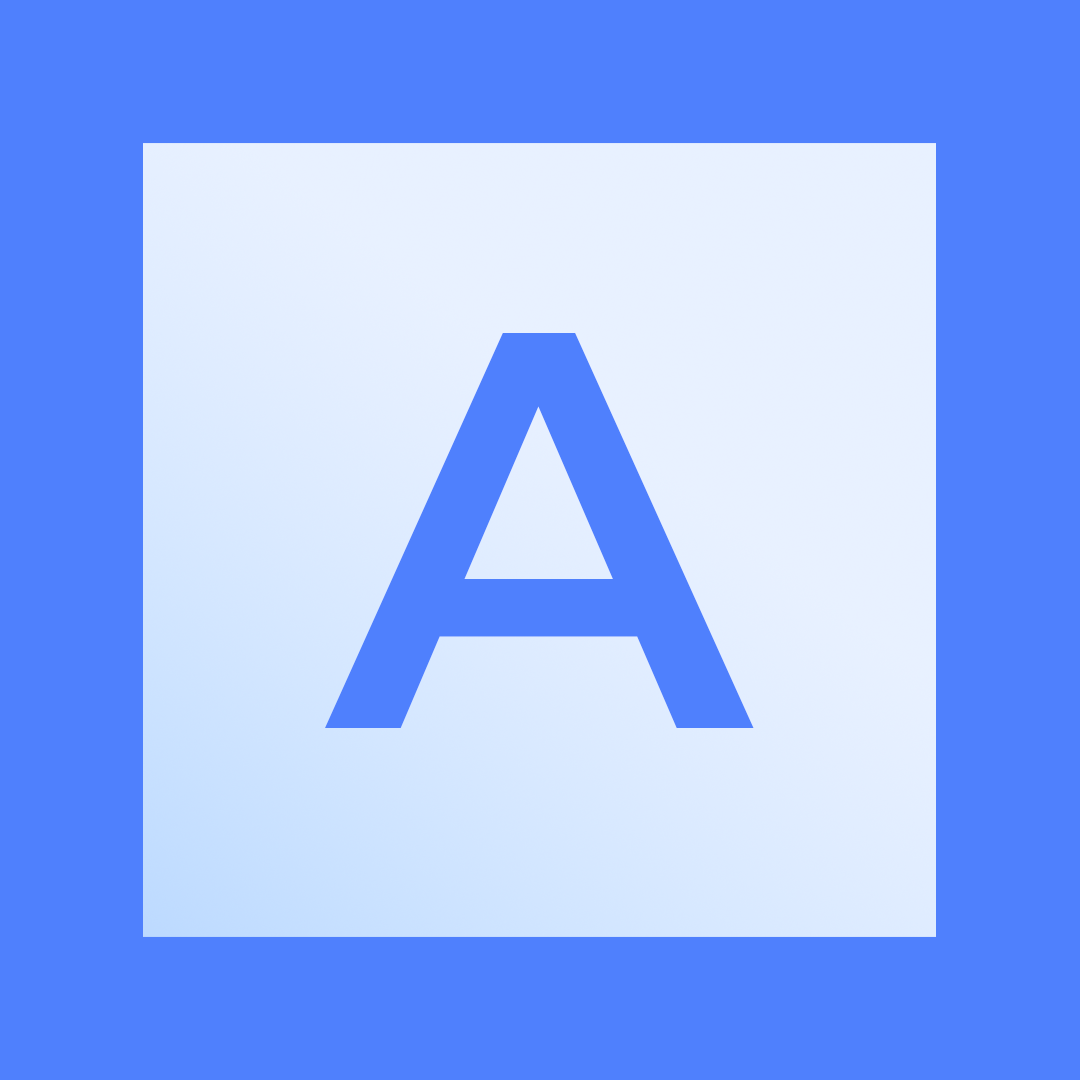
<style>
.page{position:relative;width:1080px;height:1080px;background:#4f80fd}
.page>*{position:absolute;margin:0}
.t1{font:564.5px "Montserrat-SemiBold";letter-spacing:0.96em;color:#4f80fd}
</style>
<div class="page">
<p class="t1" style="left:325px;top:333px;width:429px;height:395px">A</p>
</div>
